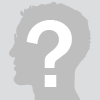
<style>
.page{position:relative;width:100px;height:100px;background:#bebebe}
.page>*{position:absolute;margin:0}
.t1{font:100px "FranklinGothic-Medium";color:#ffffff}
</style>
<div class="page">
<p class="t1" style="left:26px;top:20px;width:46px;height:67px">?</p>
</div>
